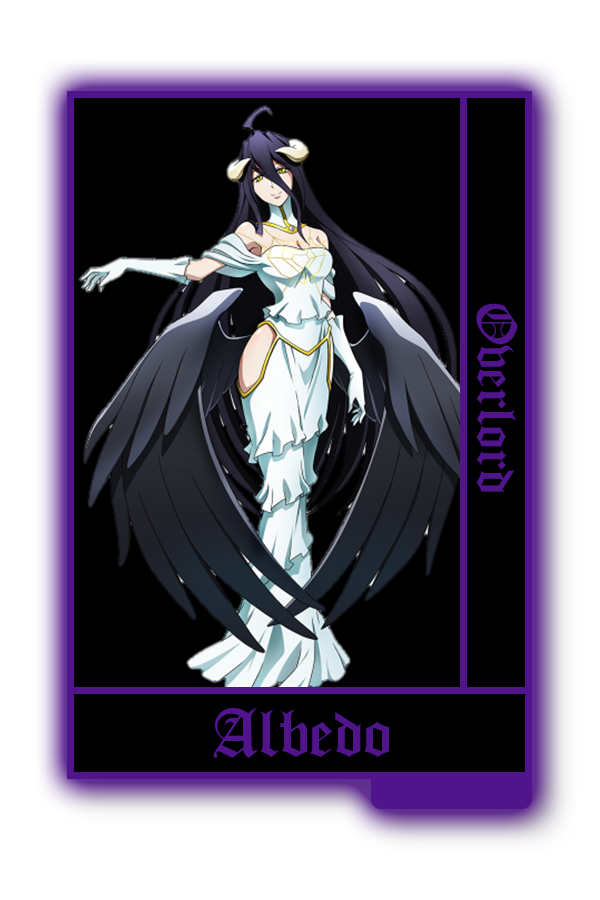
<style>
.page{position:relative;width:600px;height:900px;background:#000000}
.page>*{position:absolute;margin:0}
.t1{font:61.5px "OldLondon";color:#51158b}
.t2{font:75px "OldLondon";color:#51158b}
</style>
<div class="page">
<p class="t1" style="left:476px;top:303px;width:42px;height:189px;rotate:90deg">Overlord</p>
<p class="t2" style="left:213px;top:708px;width:176px;height:50px">Albedo</p>
</div>
